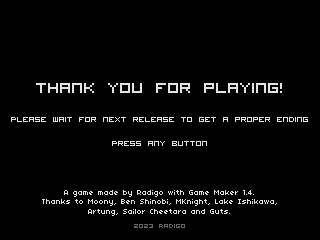
<style>
.page{position:relative;width:320px;height:240px;background:#000000}
.page>*{position:absolute;margin:0}
.t1{font:20px "VisitorTT1BRK";color:#e3e3e3}
.t2{font:10px "VisitorTT1BRK";color:#e3e3e3}
.t3{font:8px "04b03";color:#e3e3e3}
.t4{font:8px "VisitorTT1BRK";color:#656565}
</style>
<div class="page">
<p class="t1" style="left:36px;top:83px;width:246px;height:10px">Thank you for playing!</p>
<p class="t2" style="left:11px;top:117px;width:297px;height:29px;text-align:center">Please wait for next release to get a proper ending<br><br>Press any button</p>
<p class="t3" style="left:42px;top:190px;width:235px;height:26px;text-align:center">A game made by Radigo with Game Maker 1.4.<br>Thanks to Moony, Ben Shinobi, MKnight, Lake Ishikawa,<br>Artung, Sailor Cheetara and Guts.</p>
<p class="t4" style="left:134px;top:224px;width:51px;height:4px">2023 Radigo</p>
</div>
